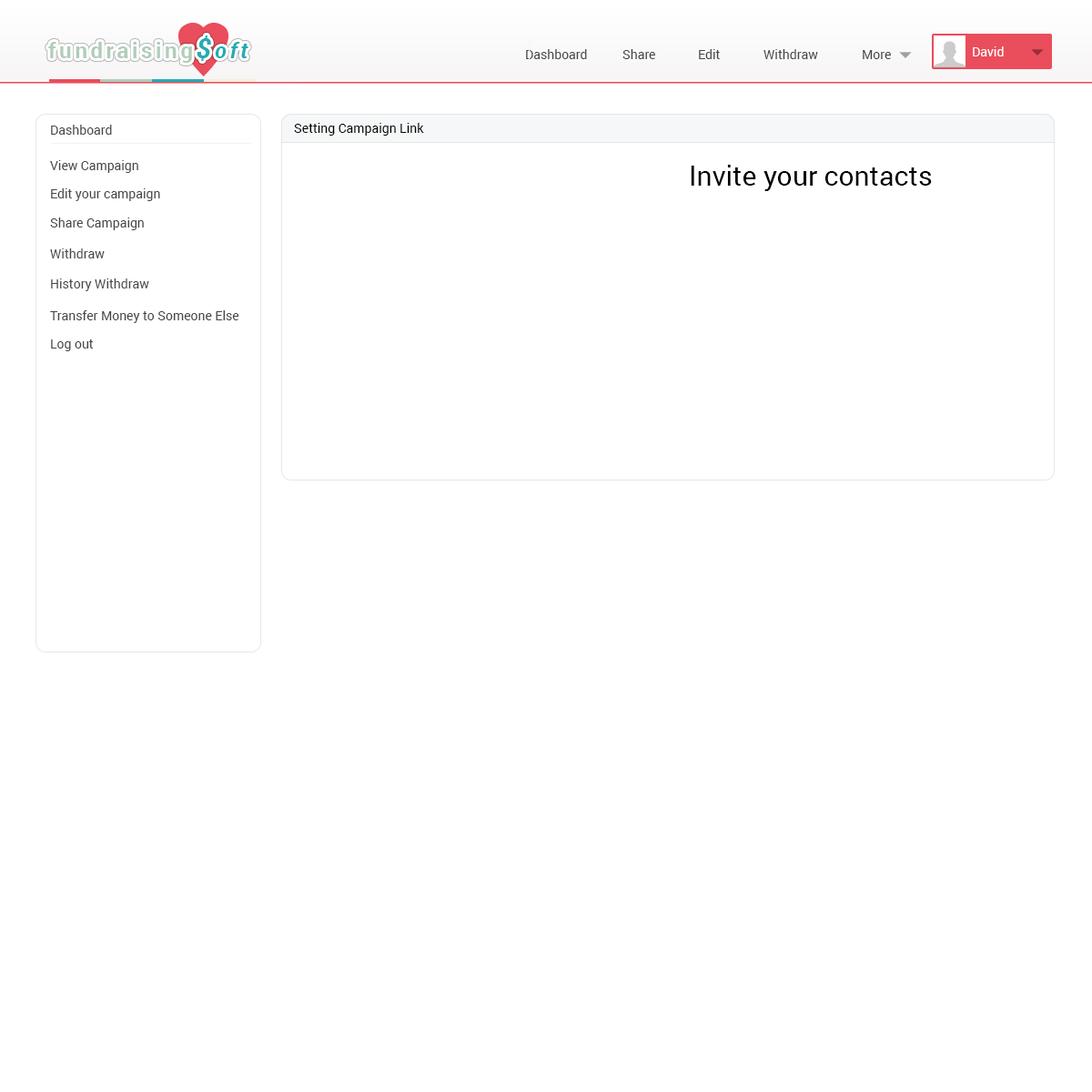
<style>
.page{position:relative;width:1092px;height:1092px;background:#ffffff}
.page>*{position:absolute;margin:0}
.t1{font:21.8px "Roboto-Bold";letter-spacing:0.15em;color:#b2ccba}
.t2{font:27.3px "Roboto-BoldItalic";letter-spacing:0.15em;color:#23acb4}
.t3{font:21.8px "Roboto-BoldItalic";letter-spacing:0.15em;color:#23acb4}
.t4{font:12.7px "Roboto-Regular";color:#464646}
.t5{font:12.7px "Roboto-Regular";color:#ffffff}
.t6{font:12.7px "Roboto-Regular";color:#000000}
.t7{font:27.3px "Roboto-Regular";color:#000000}
</style>
<div class="page">
<p class="t1" style="left:48px;top:35px;width:200px;height:28px">fundraising<span class="t2">$</span><span class="t3">oft</span></p>
<p class="t4" style="left:526px;top:49px;width:61px;height:10px">Dashboard</p>
<p class="t4" style="left:622px;top:49px;width:33px;height:10px">Share</p>
<p class="t4" style="left:699px;top:49px;width:21px;height:10px">Edit</p>
<p class="t4" style="left:763px;top:49px;width:55px;height:10px">Withdraw</p>
<p class="t4" style="left:863px;top:50px;width:28px;height:9px">More</p>
<p class="t5" style="left:973px;top:46px;width:31px;height:10px">David</p>
<p class="t4" style="left:51px;top:125px;width:61px;height:10px">Dashboard</p>
<p class="t6" style="left:294px;top:123px;width:130px;height:13px">Setting Campaign Link</p>
<p class="t4" style="left:50px;top:160px;width:88px;height:13px">View Campaign</p>
<p class="t7" style="left:691px;top:165px;width:241px;height:26px">Invite your contacts</p>
<p class="t4" style="left:51px;top:188px;width:109px;height:13px">Edit your campaign</p>
<p class="t4" style="left:50px;top:217px;width:94px;height:13px">Share Campaign</p>
<p class="t4" style="left:50px;top:248px;width:55px;height:10px">Withdraw</p>
<p class="t4" style="left:51px;top:278px;width:98px;height:13px">History Withdraw</p>
<p class="t4" style="left:50px;top:310px;width:189px;height:13px">Transfer Money to Someone Else</p>
<p class="t4" style="left:51px;top:339px;width:42px;height:12px">Log out</p>
</div>
